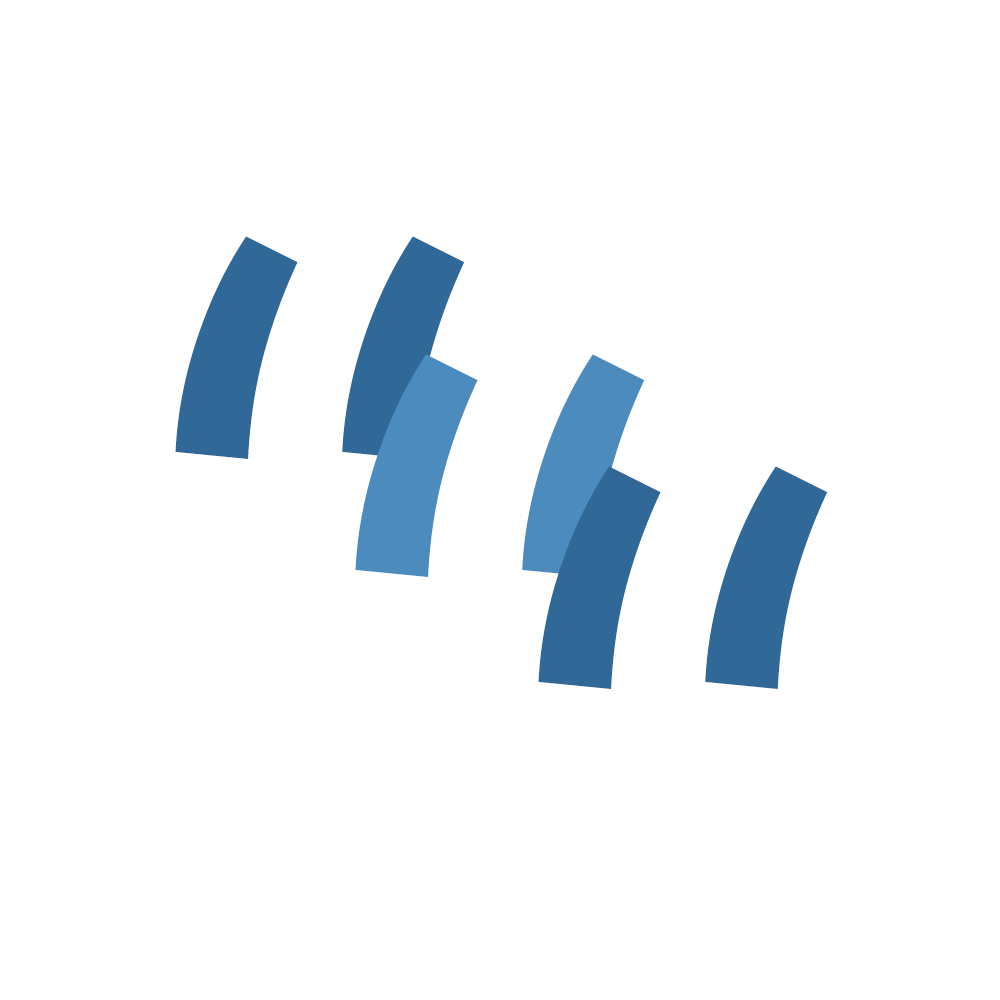
<style>
.page{position:relative;width:1000px;height:1000px;background:#ffffff}
.page>*{position:absolute;margin:0}
.t1{font:882px "Seravek";color:#306998}
.t2{font:882px "Seravek";color:#4b8bbe}
</style>
<div class="page">
<p class="t1" style="left:175px;top:236px;width:290px;height:223px">“</p>
<p class="t2" style="left:355px;top:354px;width:290px;height:223px">“</p>
<p class="t1" style="left:538px;top:466px;width:290px;height:223px">“</p>
</div>
